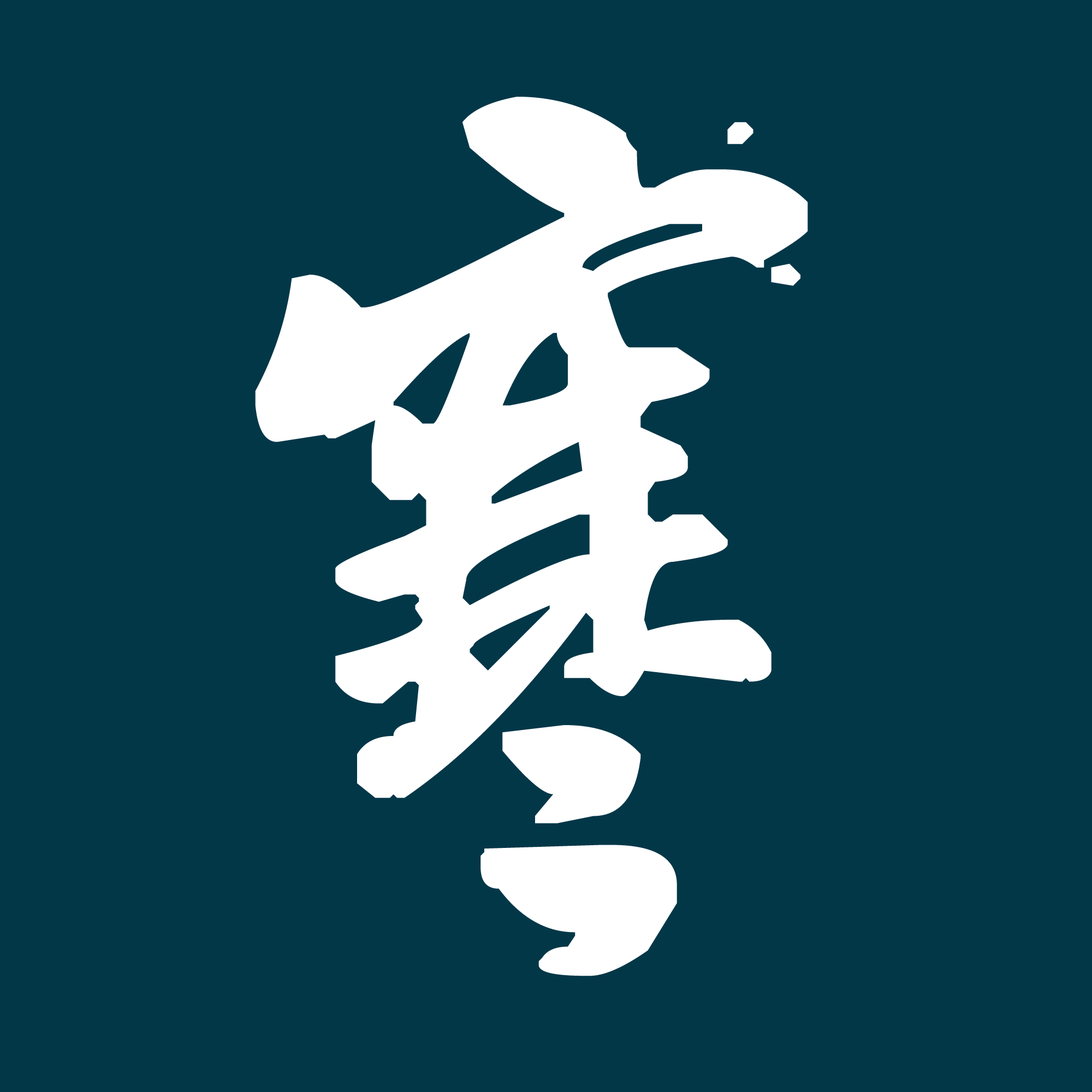
<style>
.page{position:relative;width:1092px;height:1092px;background:#023748}
.page>*{position:absolute;margin:0}
.t1{font:929.6px "ÊéÌå·»Ã×ÜÀÌå";letter-spacing:-0.04em;color:#ffffff}
</style>
<div class="page">
<p class="t1" style="left:255px;top:97px;width:553px;height:879px">寒</p>
</div>
